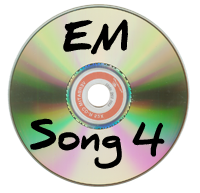
<style>
.page{position:relative;width:200px;height:193px;background:#ffffff}
.page>*{position:absolute;margin:0}
.t1{font:36px "DanielBlack";color:#000000}
</style>
<div class="page">
<p class="t1" style="left:63px;top:19px;width:65px;height:36px">EM</p>
<p class="t1" style="left:30px;top:118px;width:92px;height:51px">Song</p>
<p class="t1" style="left:132px;top:122px;width:33px;height:35px">4</p>
</div>
